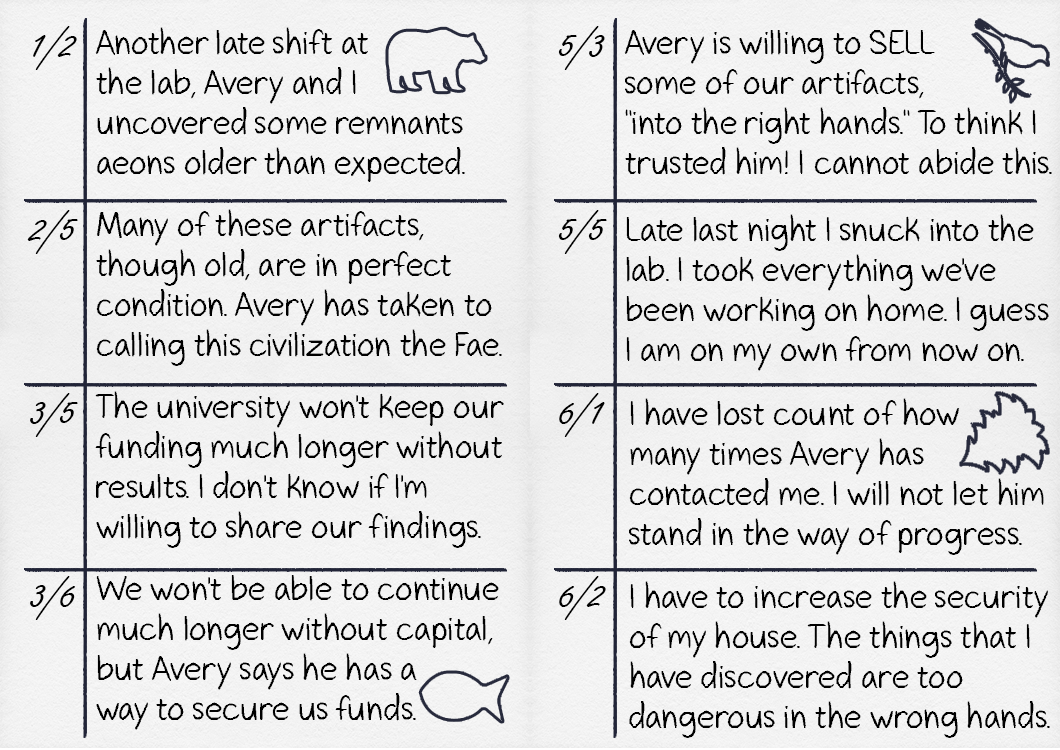
<style>
.page{position:relative;width:1060px;height:750px}
.page>*{position:absolute;margin:0}
.t1{font:45px/91.7px "FreestyleScript-Regular";color:#000000}
.t2{font:33.3px "GavinScript2";color:#000000}
</style>
<div class="page">
<p class="t1" style="left:27px;top:26px;width:51px;height:594px;text-align:center">1/2<br><br>2/5<br><br>3/5<br><br>3/6</p>
<p class="t2" style="left:95px;top:27px;width:370px;height:155px">Another late shift at <br>the lab, Avery and I <br>uncovered some remnants aeons older than expected.</p>
<p class="t1" style="left:558px;top:26px;width:49px;height:594px;text-align:center">5/3<br><br>5/5<br><br>6/1<br><br>6/2</p>
<p class="t2" style="left:624px;top:30px;width:428px;height:145px">Avery is willing to SELL <br>some of our artifacts,<br>"into the right hands." To think I trusted him! I cannot abide this.</p>
<p class="t2" style="left:96px;top:209px;width:406px;height:157px">Many of these artifacts, though old, are in perfect condition. Avery has taken to calling this civilization the Fae.</p>
<p class="t2" style="left:626px;top:214px;width:423px;height:157px">Late last night I snuck into the lab. I took everything we've been working on home. I guess I am on my own from now on.</p>
<p class="t2" style="left:95px;top:391px;width:409px;height:157px">The university won't keep our funding much longer without results. I don't know if I'm willing to share our findings.</p>
<p class="t2" style="left:629px;top:398px;width:415px;height:157px">I have lost count of how<br>many times Avery has<br>contacted me. I will not let him stand in the way of progress.</p>
<p class="t2" style="left:96px;top:575px;width:403px;height:155px">We won't be able to continue much longer without capital, but Avery says he has a<br>way to secure us funds.</p>
<p class="t2" style="left:629px;top:581px;width:421px;height:157px">I have to increase the security of my house. The things that I have discovered are too dangerous in the wrong hands.</p>
</div>
